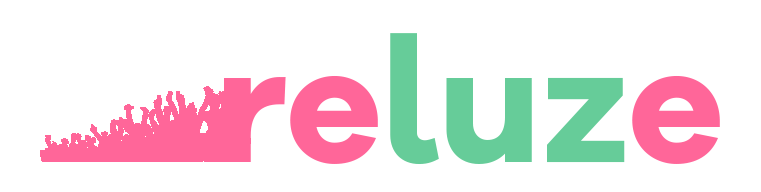
<style>
.page{position:relative;width:761px;height:192px;background:#ffffff}
.page>*{position:absolute;margin:0}
.t1{font:166.7px "GalanoGrotesqueAltDEMO-Bold";color:#66cc99}
.t2{font:166.7px "GalanoGrotesqueAltDEMO-Bold";color:#ff6699}
</style>
<div class="page">
<p class="t1" style="left:224px;top:33px;width:496px;height:132px"><span class="t2">re</span>luz<span class="t2">e</span></p>
</div>
